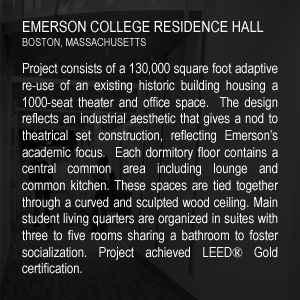
<style>
.page{position:relative;width:300px;height:300px}
.page>*{position:absolute;margin:0}
.t1{font:15.6px "ArialNarrow";color:#ffffff}
.t2{font:11.1px "ArialNarrow"}
.t3{font:13.9px "ArialNarrow";color:#fefefe}
.t4{font:13.9px "TimesNewRomanPSMT";color:#fefefe}
</style>
<div class="page">
<p class="t1" style="left:23px;top:20px;width:241px;height:13px">EMERSON COLLEGE RESIDENCE HALL</p>
<p class="t2" style="left:22px;top:38px;width:124px;height:10px">BOSTON, MASSACHUSETTS</p>
<p class="t3" style="left:22px;top:62px;width:257px;height:212px;text-align:justify">Project consists of a 130,000 square foot adaptive re-use of an existing historic building housing a 1000-seat theater and office space.  The design reflects an industrial aesthetic that gives a nod to theatrical set construction, reflecting Emerson’s academic focus.  Each dormitory floor contains a central common area including lounge and common kitchen. These spaces are tied together through a curved and sculpted wood ceiling. Main student living quarters are organized in suites with three to five rooms sharing a bathroom to foster socialization. Project achieved LEED<span class="t4">®</span> Gold certification.</p>
</div>
